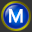
<style>
.page{position:relative;width:32px;height:32px;background:#333333}
.page>*{position:absolute;margin:0}
.t1{font:18px "SegoeUI";letter-spacing:-0.05em;color:#ffffff;font-weight:bold}
</style>
<div class="page">
<p class="t1" style="left:9px;top:9px;width:14px;height:14px">M</p>
</div>
